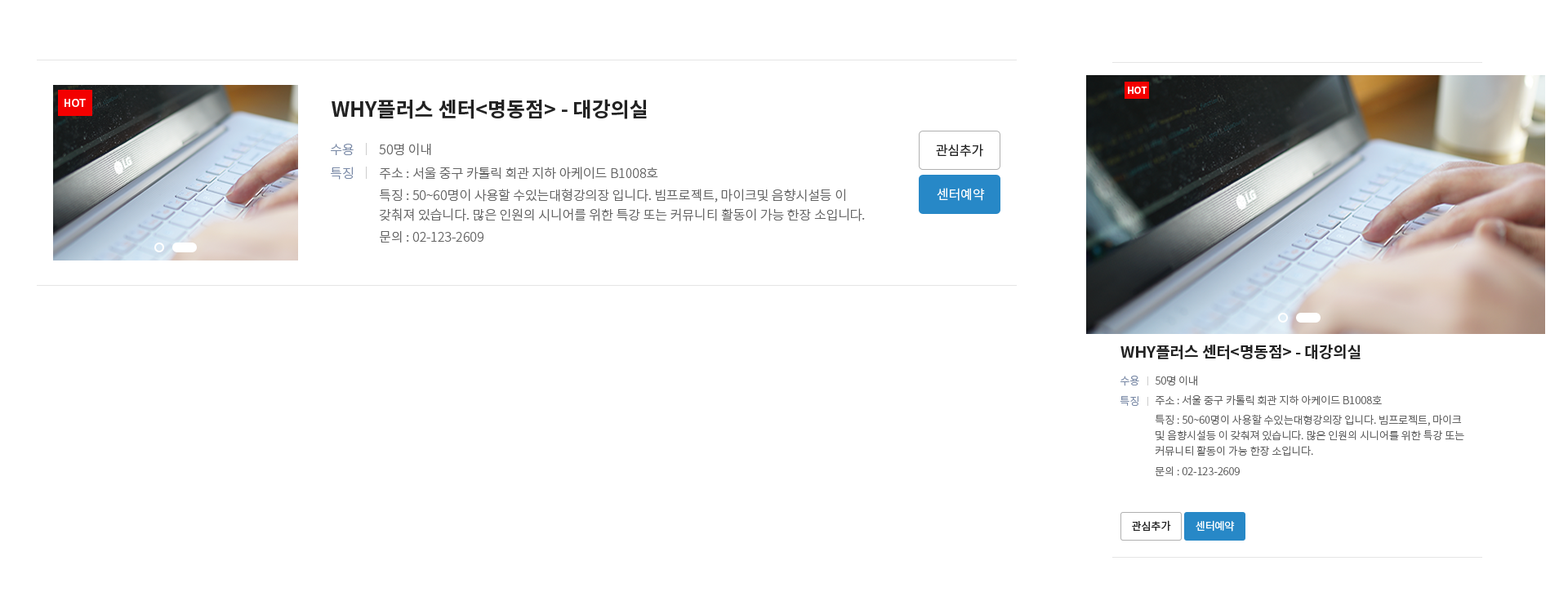
<style>
.page{position:relative;width:1568px;height:610px;background:#ffffff}
.page>*{position:absolute;margin:0}
.t1{font:9px "NotoSansKR-Bold";color:#ffffff}
.t2{font:10.6px "NotoSansKR-Bold";color:#ffffff}
.t3{font:20.4px "NotoSansKR-Bold";color:#222222}
.t4{font:13.1px/23.7px "NotoSansKR-Light";color:#7888a5}
.t5{font:13.1px/19.6px "NotoSansKR-Light";color:#646464}
.t6{font:13.1px/32.7px "NotoSansKR-Light";color:#646464}
.t7{font:13.1px/23.7px "NotoSansKR-Light";color:#646464}
.t8{font:13.1px/22.1px "NotoSansKR-Light";color:#646464}
.t9{font:13.1px "NotoSansKR-Regular";color:#222222}
.t10{font:13.1px "NotoSansKR-Regular";color:#ffffff}
.t11{font:15.5px "NotoSansKR-Bold";color:#222222}
.t12{font:10.6px/20.4px "NotoSansKR-Light";color:#7888a5}
.t13{font:10.6px/15.5px "NotoSansKR-Light";color:#646464}
.t14{font:10.6px/20.4px "NotoSansKR-Light";color:#646464}
.t15{font:10.6px/19.6px "NotoSansKR-Light";color:#646464}
.t16{font:10.6px "NotoSansKR-Regular";color:#222222}
.t17{font:10.6px "NotoSansKR-Regular";color:#ffffff}
</style>
<div class="page">
<p class="t1" style="left:1128px;top:87px;width:19px;height:7px">HOT</p>
<p class="t2" style="left:65px;top:99px;width:21px;height:8px">HOT</p>
<p class="t3" style="left:332px;top:99px;width:315px;height:20px">WHY플러스 센터&lt;명동점&gt; - 대강의실</p>
<p class="t4" style="left:331px;top:144px;width:23px;height:36px;text-align:justify">수용<br>특징</p>
<p class="t5" style="left:379px;top:143px;width:486px;height:100px;text-align:justify"><span class="t6">50명 이내<br></span><span class="t7">주소</span><span class="t8"> : 서울 중구 카톨릭 회관 지하 아케이드 B1008호<br>특징 </span>: 50~60명이 사용할 수있는대형강의장 입니다. 빔프로젝트, 마이크및 음향시설등 이<br>갖춰져 있습니다. 많은 인원의 시니어를 위한 특강 또는 커뮤니티 활동이 가능 한장 소입니다.<br>문의 : 02-123<span class="t8">-2609</span></p>
<p class="t9" style="left:936px;top:144px;width:47px;height:13px">관심추가</p>
<p class="t10" style="left:937px;top:188px;width:48px;height:13px">센터예약</p>
<p class="t11" style="left:1120px;top:344px;width:241px;height:15px">WHY플러스 센터&lt;명동점&gt; - 대강의실</p>
<p class="t12" style="left:1120px;top:376px;width:19px;height:30px;text-align:justify">수용<br>특징</p>
<p class="t13" style="left:1155px;top:376px;width:309px;height:100px;text-align:justify"><span class="t14">50명 이내<br></span><span class="t15">주소 : 서울 중구 카톨릭 회관 지하 아케이드 B1008호<br>특징 : 50~60명</span>이 사용할 수있는대형강의장 입니다. 빔프로젝트, 마이크<br>및 음향시설등 이 갖춰져 있습니다. 많은 인원의 시니어를 위한 특강 또는<br>커뮤니티 활동이 가능 한장 소입니다.<br>문의 : 02-123-<span class="t14">2609</span></p>
<p class="t16" style="left:1132px;top:520px;width:39px;height:11px">관심추가</p>
<p class="t17" style="left:1196px;top:520px;width:39px;height:12px">센터예약</p>
</div>
